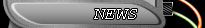
<style>
.page{position:relative;width:205px;height:28px}
.page>*{position:absolute;margin:0}
.t1{font:18px "CourierNewPS-ItalicMT";color:#ffffff}
</style>
<div class="page">
<p class="t1" style="left:94px;top:9px;width:43px;height:10px">NEWS</p>
</div>
